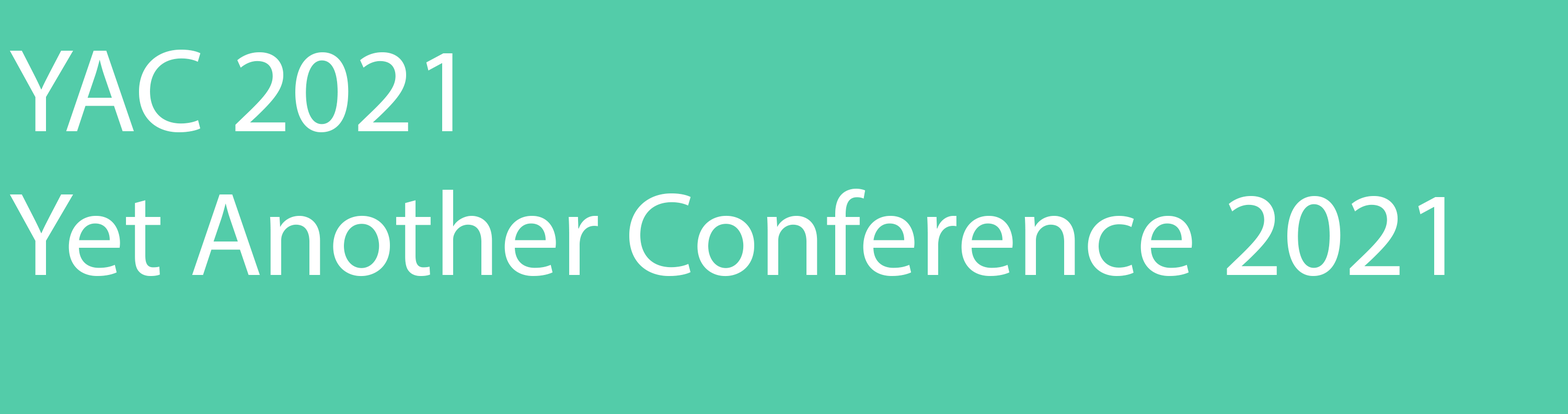
<style>
.page{position:relative;width:1568px;height:414px;background:#53cca9}
.page>*{position:absolute;margin:0}
.t1{font:119.8px "MyriadPro-Regular";color:#ffffff}
</style>
<div class="page">
<p class="t1" style="left:9px;top:50px;width:1436px;height:226px">YAC 2021<br>Yet Another Conference 2021</p>
</div>
